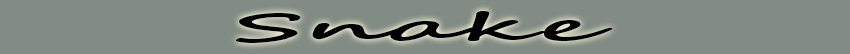
<style>
.page{position:relative;width:850px;height:54px;background:#838c84}
.page>*{position:absolute;margin:0}
.t1{font:39px "SegoeScript-Bold";color:#000000;scale:2.84 1}
</style>
<div class="page">
<p class="t1" style="left:236px;top:11px;width:377px;height:32px">Snake</p>
</div>
